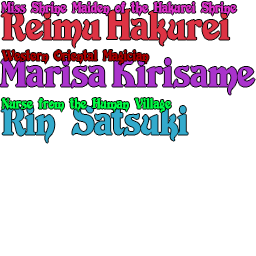
<style>
.page{position:relative;width:256px;height:256px;background:#ffffff}
.page>*{position:absolute;margin:0}
.t1{font:12.6px "DevinneSwash";color:#dd33cb;font-weight:bold;scale:0.76 1}
.t2{font:37.8px "DevinneSwash";color:#dd3344;font-weight:bold;scale:0.76 1}
.t3{font:12.6px "DevinneSwash";color:#aa0000;font-weight:bold;scale:0.76 1}
.t4{font:37.8px "DevinneSwash";color:#aa33cc;font-weight:bold;scale:0.76 1}
.t5{font:12.6px "DevinneSwash";color:#00ff48;font-weight:bold;scale:0.76 1}
.t6{font:37.8px "DevinneSwash";color:#33aacc;font-weight:bold;scale:0.76 1}
</style>
<div class="page">
<p class="t1" style="left:1px;top:2px;width:236px;height:14px">Miss Shrine Maiden of the Hakurei Shrine</p>
<p class="t2" style="left:1px;top:9px;width:229px;height:39px">Reimu Hakurei</p>
<p class="t3" style="left:2px;top:50px;width:147px;height:15px">Western Oriental Magician</p>
<p class="t4" style="left:0px;top:57px;width:255px;height:38px">Marisa Kirisame</p>
<p class="t5" style="left:1px;top:98px;width:170px;height:15px">Nurse from the Human Village</p>
<p class="t6" style="left:1px;top:105px;width:187px;height:38px">Rin Satsuki</p>
</div>
